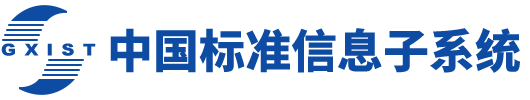
<style>
.page{position:relative;width:530px;height:100px;background:#ffffff}
.page>*{position:absolute;margin:0}
.t1{font:46px "SourceHanSansCN-Heavy";color:#0e4ca4}
.t2{font:16.2px "Arial-Black";letter-spacing:0.06em;color:#0e4ca4;scale:1.11 1}
</style>
<div class="page">
<p class="t1" style="left:110px;top:28px;width:410px;height:45px">中国标准信息子系统</p>
<p class="t2" style="left:1px;top:43px;width:95px;height:13px">G X I S T</p>
</div>
